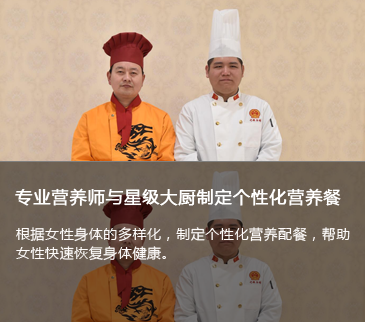
<style>
.page{position:relative;width:365px;height:322px}
.page>*{position:absolute;margin:0}
.t1{font:17px "MicrosoftYaHeiUI";letter-spacing:0.04em;color:#ffffff;font-weight:bold}
.t2{font:14px/18.4px "MicrosoftYaHeiUI";letter-spacing:0.04em;color:#fdfbfa}
</style>
<div class="page">
<p class="t1" style="left:15px;top:188px;width:326px;height:18px">专业营养师与星级大厨制定个性化营养餐</p>
<p class="t2" style="left:16px;top:227px;width:334px;height:34px">根据女性身体的多样化，制定个性化营养配餐，帮助女性快速恢复身体健康。</p>
</div>
